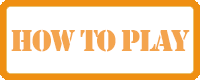
<style>
.page{position:relative;width:200px;height:80px;background:#ffffff}
.page>*{position:absolute;margin:0}
.t1{font:31.1px "Stencil";letter-spacing:-0.055em;color:#f4a44e}
</style>
<div class="page">
<p class="t1" style="left:11px;top:29px;width:179px;height:23px">HOW TO PLAY</p>
</div>
